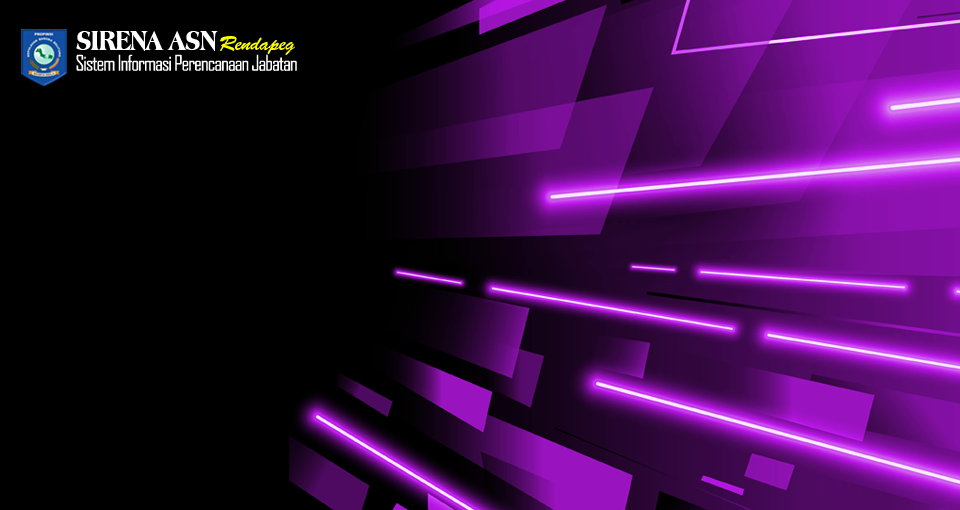
<style>
.page{position:relative;width:960px;height:510px;background:#000000}
.page>*{position:absolute;margin:0}
.t1{font:29.2px "AmericanaBT-ExtraBoldCondensed";letter-spacing:-0.025em;color:#ffffff}
.t2{font:20.3px "BrushScriptStd";letter-spacing:-0.025em;color:#fcff00}
.t3{font:20.8px "AgencyFB-Reg";letter-spacing:-0.05em;color:#ffffff}
</style>
<div class="page">
<p class="t1" style="left:76px;top:31px;width:142px;height:20px">SIRENA ASN</p>
<p class="t2" style="left:220px;top:36px;width:75px;height:19px">Rendapeg</p>
<p class="t3" style="left:76px;top:54px;width:221px;height:17px">Sistem Informasi Perencanaan Jabatan</p>
</div>
